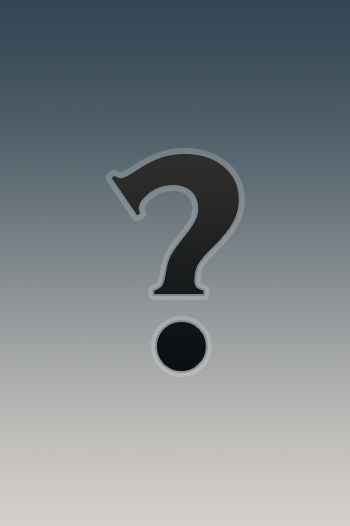
<style>
.page{position:relative;width:350px;height:526px}
.page>*{position:absolute;margin:0}
.t1{font:316.7px "CopperplateGothic-Bold";color:#272726}
</style>
<div class="page">
<p class="t1" style="left:110px;top:153px;width:130px;height:219px">?</p>
</div>
